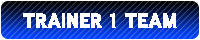
<style>
.page{position:relative;width:200px;height:40px;background:#ffffff}
.page>*{position:absolute;margin:0}
.t1{font:18px "DFGothic-SU-WINP-RKSJ-H";color:#ffffff}
</style>
<div class="page">
<p class="t1" style="left:23px;top:13px;width:154px;height:15px">TRAINER 1 TEAM</p>
</div>
